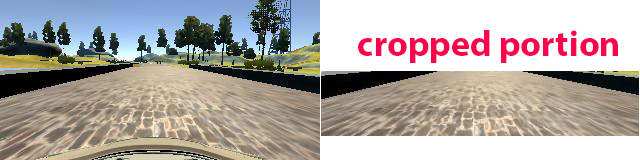
<style>
.page{position:relative;width:640px;height:160px;background:#ffffff}
.page>*{position:absolute;margin:0}
.t1{font:36px "MyriadPro-Bold";color:#fd034e}
</style>
<div class="page">
<p class="t1" style="left:358px;top:30px;width:260px;height:33px">cropped portion</p>
</div>
